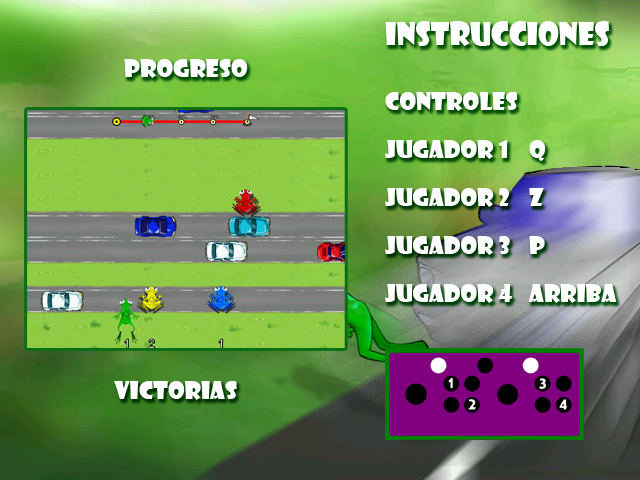
<style>
.page{position:relative;width:640px;height:480px}
.page>*{position:absolute;margin:0}
.t1{font:30px "ShowcardGothic-Reg";color:#ffffff}
.t2{font:24px "ShowcardGothic-Reg";color:#ffffff}
.t3{font:24px/48px "ShowcardGothic-Reg";color:#ffffff}
</style>
<div class="page">
<p class="t1" style="left:385px;top:21px;width:224px;height:25px">instrucciones</p>
<p class="t2" style="left:124px;top:59px;width:124px;height:19px">progreso</p>
<p class="t3" style="left:385px;top:92px;width:232px;height:211px">controles<br>jugador 1 q<br>jugador 2  z<br>jugador 3  p<br>jugador 4 arriba</p>
<p class="t2" style="left:114px;top:381px;width:123px;height:19px">victorias</p>
</div>
